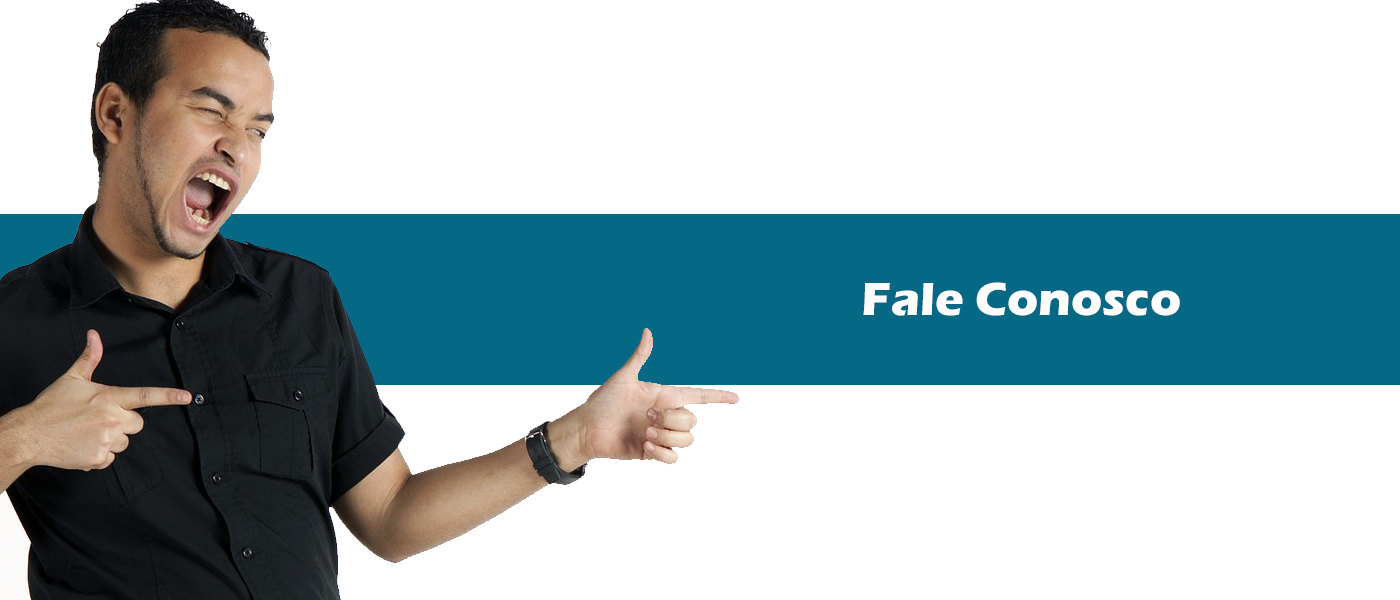
<style>
.page{position:relative;width:1400px;height:600px;background:#ffffff}
.page>*{position:absolute;margin:0}
.t1{font:48px "ErasITC-Bold";color:#ffffff}
</style>
<div class="page">
<p class="t1" style="left:863px;top:282px;width:317px;height:34px">Fale Conosco</p>
</div>
